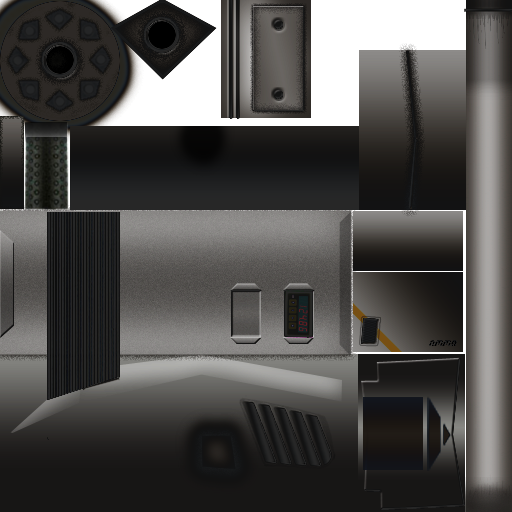
<style>
.page{position:relative;width:512px;height:512px}
.page>*{position:absolute;margin:0}
.t1{font:8.1px "CriminalItalic";color:#000000}
</style>
<div class="page">
<p class="t1" style="left:429px;top:340px;width:28px;height:6px">AMMO</p>
</div>
